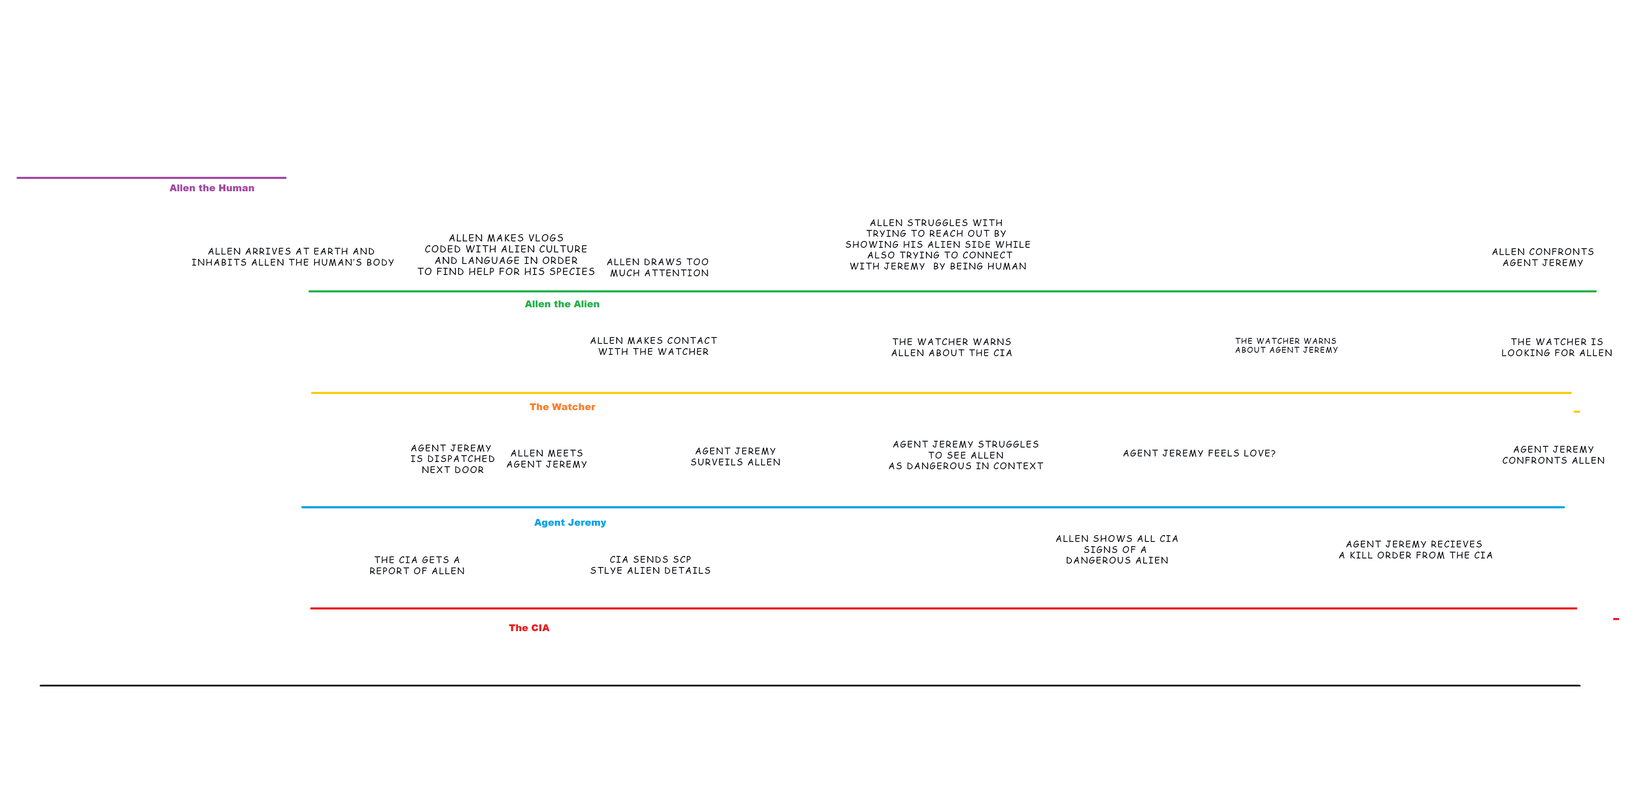
<style>
.page{position:relative;width:1629px;height:788px;background:#ffffff}
.page>*{position:absolute;margin:0}
.t1{font:9px "ComicSansMS";letter-spacing:0.1em;color:#0e1018;text-transform:uppercase}
.t2{font:9.3px "ComicSansMS";letter-spacing:0.1em;color:#0e1018;text-transform:uppercase}
.t3{font:7.7px "ComicSansMS";letter-spacing:0.1em;color:#0e1018;text-transform:uppercase}
</style>
<div class="page">
<p class="t1" style="left:846px;top:219px;width:184px;height:51px;text-align:center">Allen struggles with <br>trying to reach out by <br>showing his alien side while<br> also trying to connect<br>with Jeremy  by being human</p>
<p class="t2" style="left:417px;top:234px;width:178px;height:41px;text-align:center">Allen makes vlogs<br>coded with alien culture<br>and language in order<br>to find help for his species</p>
<p class="t1" style="left:192px;top:247px;width:202px;height:19px;text-align:center">Allen arrives at Earth and <br>inhabits Allen the human’s body</p>
<p class="t1" style="left:1492px;top:248px;width:102px;height:19px;text-align:center">Allen confronts<br>aGENT jEREMY</p>
<p class="t1" style="left:607px;top:258px;width:102px;height:19px;text-align:center">ALLEN Draws too <br>much attention</p>
<p class="t1" style="left:590px;top:337px;width:127px;height:18px;text-align:center">Allen Makes Contact<br>With the Watcher</p>
<p class="t1" style="left:891px;top:338px;width:121px;height:18px;text-align:center">THE WATCHER WARNS<br>ALLEN ABOUT THE CIA</p>
<p class="t3" style="left:1236px;top:338px;width:102px;height:15px">ThE Watcher Warns<br>about Agent Jeremy</p>
<p class="t1" style="left:1502px;top:338px;width:110px;height:18px;text-align:center">The Watcher is<br>Looking for Allen</p>
<p class="t1" style="left:411px;top:444px;width:84px;height:29px;text-align:center">Agent Jeremy <br>is dispatched<br>next door</p>
<p class="t1" style="left:507px;top:449px;width:80px;height:19px;text-align:center">Allen Meets<br>Agent Jeremy</p>
<p class="t1" style="left:691px;top:447px;width:89px;height:18px;text-align:center">AGENT JEREMY<br>surveils Allen</p>
<p class="t1" style="left:889px;top:440px;width:155px;height:29px;text-align:center">Agent Jeremy struggles<br>to see allen<br>as dangerous in context</p>
<p class="t1" style="left:1123px;top:449px;width:153px;height:8px">Agent Jeremy feels love?</p>
<p class="t1" style="left:1503px;top:445px;width:102px;height:19px;text-align:center">Agent Jeremy<br>Confronts Allen</p>
<p class="t1" style="left:1056px;top:535px;width:122px;height:29px;text-align:center">Allen Shows All CIA<br>signs of a <br>dangerous ALIEN</p>
<p class="t1" style="left:1339px;top:540px;width:154px;height:19px;text-align:center">aGENT jEREMY RECIEVES <br>A KILL ORDER FROM THE cia</p>
<p class="t1" style="left:370px;top:556px;width:94px;height:18px;text-align:center">THE CIA gets a<br>report of Allen</p>
<p class="t1" style="left:590px;top:556px;width:120px;height:18px;text-align:center">CIA SENDS SCP<br>stlye ALIEN Details</p>
</div>
